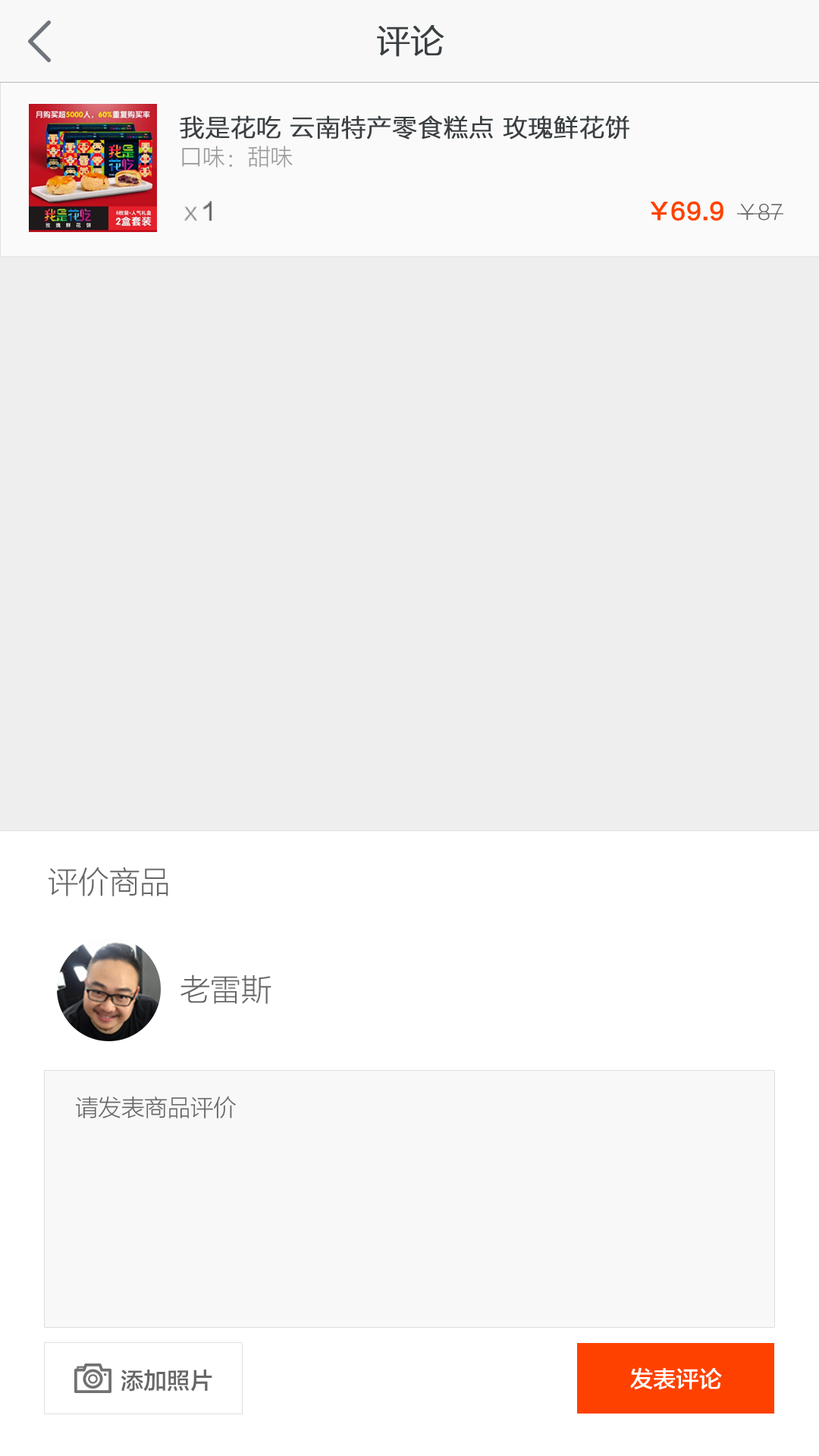
<style>
.page{position:relative;width:819px;height:1456px;background:#eeeeee}
.page>*{position:absolute;margin:0}
.t1{font:33.4px "FZLTXHK--GBK1-0";color:#3a3f42;font-weight:bold}
.t2{font:24.2px/30.7px "FZLTXHK--GBK1-0";color:#3a3f42;font-weight:bold}
.t3{font:22.7px/30.7px "FZLTXHK--GBK1-0";color:#999999}
.t4{font:23px "FZLTXHK--GBK1-0";color:#666666}
.t5{font:23px "FZLTZHK--GBK1-0";color:#666666}
.t6{font:23px "FZLTZHK--GBK1-0";color:#ff4100}
.t7{font:20.5px "FZLTXHK--GBK1-0";color:#666666}
.t8{font:30.7px "FZLTXHK--GBK1-0";color:#666666}
.t9{font:23px "FZLTZHK--GBK1-0";color:#ffffff}
</style>
<div class="page">
<p class="t1" style="left:377px;top:25px;width:67px;height:32px">评论</p>
<p class="t2" style="left:180px;top:115px;width:449px;height:53px">我是花吃 云南特产零食糕点 玫瑰鲜花饼<br><span class="t3">口味：甜味</span></p>
<p class="t4" style="left:184px;top:201px;width:28px;height:20px">x <span class="t5">1</span></p>
<p class="t6" style="left:650px;top:201px;width:133px;height:20px">￥69.9  <span class="t7">￥87</span></p>
<p class="t8" style="left:49px;top:867px;width:119px;height:29px">评价商品</p>
<p class="t8" style="left:180px;top:974px;width:91px;height:30px">老雷斯</p>
<p class="t4" style="left:76px;top:1096px;width:160px;height:23px">请发表商品评价</p>
<p class="t5" style="left:121px;top:1370px;width:91px;height:22px">添加照片</p>
<p class="t9" style="left:630px;top:1367px;width:92px;height:23px">发表评论</p>
</div>
